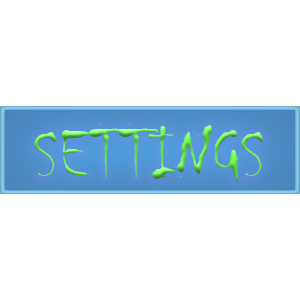
<style>
.page{position:relative;width:300px;height:300px;background:#ffffff}
.page>*{position:absolute;margin:0}
.t1{font:75px "Chiller-Regular"}
</style>
<div class="page">
<p class="t1" style="left:34px;top:123px;width:229px;height:59px">SETTINGS</p>
</div>
